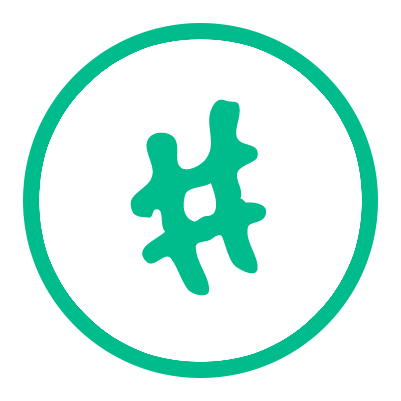
<style>
.page{position:relative;width:401px;height:401px;background:#ffffff}
.page>*{position:absolute;margin:0}
.t1{font:288.1px "GoodDog";letter-spacing:-0.025em;color:#00bc8c}
</style>
<div class="page">
<p class="t1" style="left:130px;top:99px;width:136px;height:197px;rotate:-15deg">#</p>
</div>
